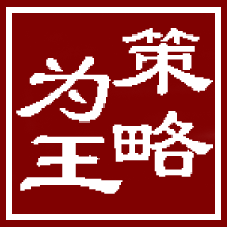
<style>
.page{position:relative;width:227px;height:227px;background:#800101}
.page>*{position:absolute;margin:0}
.t1{font:108px "Á¥Êé-Regular";color:#ffffff}
</style>
<div class="page">
<p class="t1" style="left:112px;top:28px;width:101px;height:68px">策</p>
<p class="t1" style="left:16px;top:56px;width:95px;height:67px">为</p>
<p class="t1" style="left:112px;top:111px;width:101px;height:66px">略</p>
<p class="t1" style="left:20px;top:135px;width:103px;height:59px">王</p>
</div>
